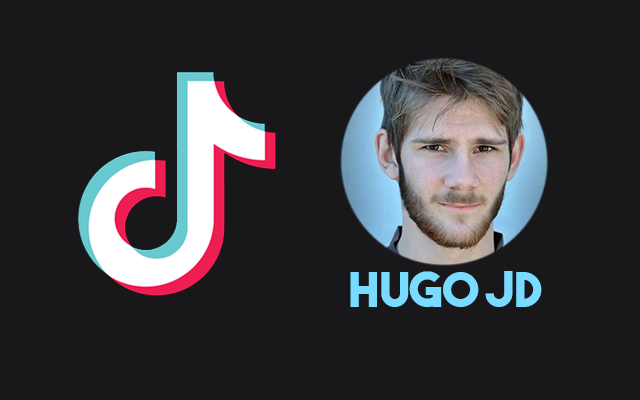
<style>
.page{position:relative;width:640px;height:400px;background:#18181b}
.page>*{position:absolute;margin:0}
.t1{font:48px "TheBoldFont";color:#79dbff}
</style>
<div class="page">
<p class="t1" style="left:350px;top:271px;width:192px;height:36px">Hugo JD</p>
</div>
